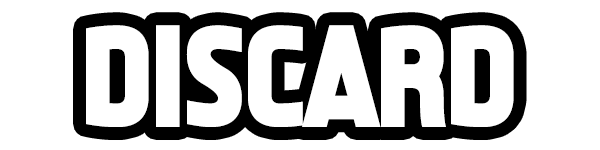
<style>
.page{position:relative;width:600px;height:150px;background:#ffffff}
.page>*{position:absolute;margin:0}
.t1{font:160px "SheSmiles";color:#ffffff}
</style>
<div class="page">
<p class="t1" style="left:86px;top:25px;width:428px;height:102px">discard</p>
</div>
